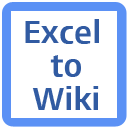
<style>
.page{position:relative;width:128px;height:128px;background:#ffffff}
.page>*{position:absolute;margin:0}
.t1{font:29.2px/33.3px "Daum_SemiBold";color:#315ba2}
</style>
<div class="page">
<p class="t1" style="left:25px;top:19px;width:74px;height:91px;text-align:center">Excel<br> to<br> Wiki</p>
</div>
